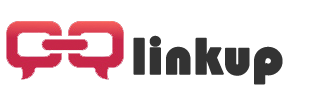
<style>
.page{position:relative;width:314px;height:106px;background:#ffffff}
.page>*{position:absolute;margin:0}
.t1{font:53px "Bauhaus93";letter-spacing:-0.01em;color:#333333;font-weight:bold}
</style>
<div class="page">
<p class="t1" style="left:133px;top:35px;width:150px;height:50px">linkup</p>
</div>
